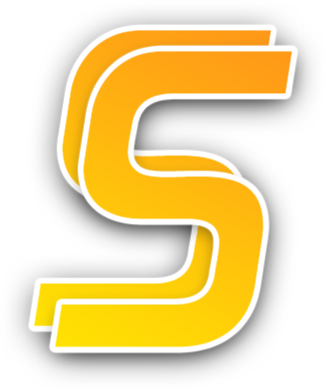
<style>
.page{position:relative;width:326px;height:390px;background:#ffffff}
.page>*{position:absolute;margin:0}
.t1{font:444.5px "DigitalEF-MediumItalic"}
</style>
<div class="page">
<p class="t1" style="left:33px;top:29px;width:239px;height:298px">S</p>
<p class="t1" style="left:54px;top:50px;width:239px;height:298px">S</p>
<p class="t1" style="left:54px;top:50px;width:239px;height:298px">S</p>
</div>
